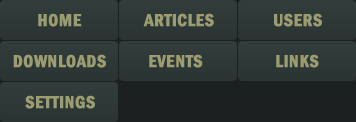
<style>
.page{position:relative;width:356px;height:122px;background:#1b2121}
.page>*{position:absolute;margin:0}
.t1{font:18px "FranklinGothic-DemiCond";color:#9c9c71;text-transform:uppercase;font-weight:bold}
</style>
<div class="page">
<p class="t1" style="left:38px;top:13px;width:44px;height:14px">home</p>
<p class="t1" style="left:143px;top:13px;width:71px;height:14px">articles</p>
<p class="t1" style="left:274px;top:13px;width:48px;height:14px">users</p>
<p class="t1" style="left:13px;top:54px;width:93px;height:14px">downloads</p>
<p class="t1" style="left:149px;top:54px;width:54px;height:14px">events</p>
<p class="t1" style="left:276px;top:54px;width:43px;height:14px">links</p>
<p class="t1" style="left:25px;top:95px;width:70px;height:14px">settings</p>
</div>
